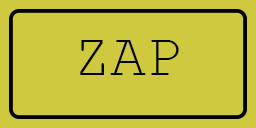
<style>
.page{position:relative;width:256px;height:128px;background:#cec93e}
.page>*{position:absolute;margin:0}
.t1{font:60px "CourierNewPSMT";color:#000000}
</style>
<div class="page">
<p class="t1" style="left:80px;top:40px;width:99px;height:35px">ZAP</p>
</div>
